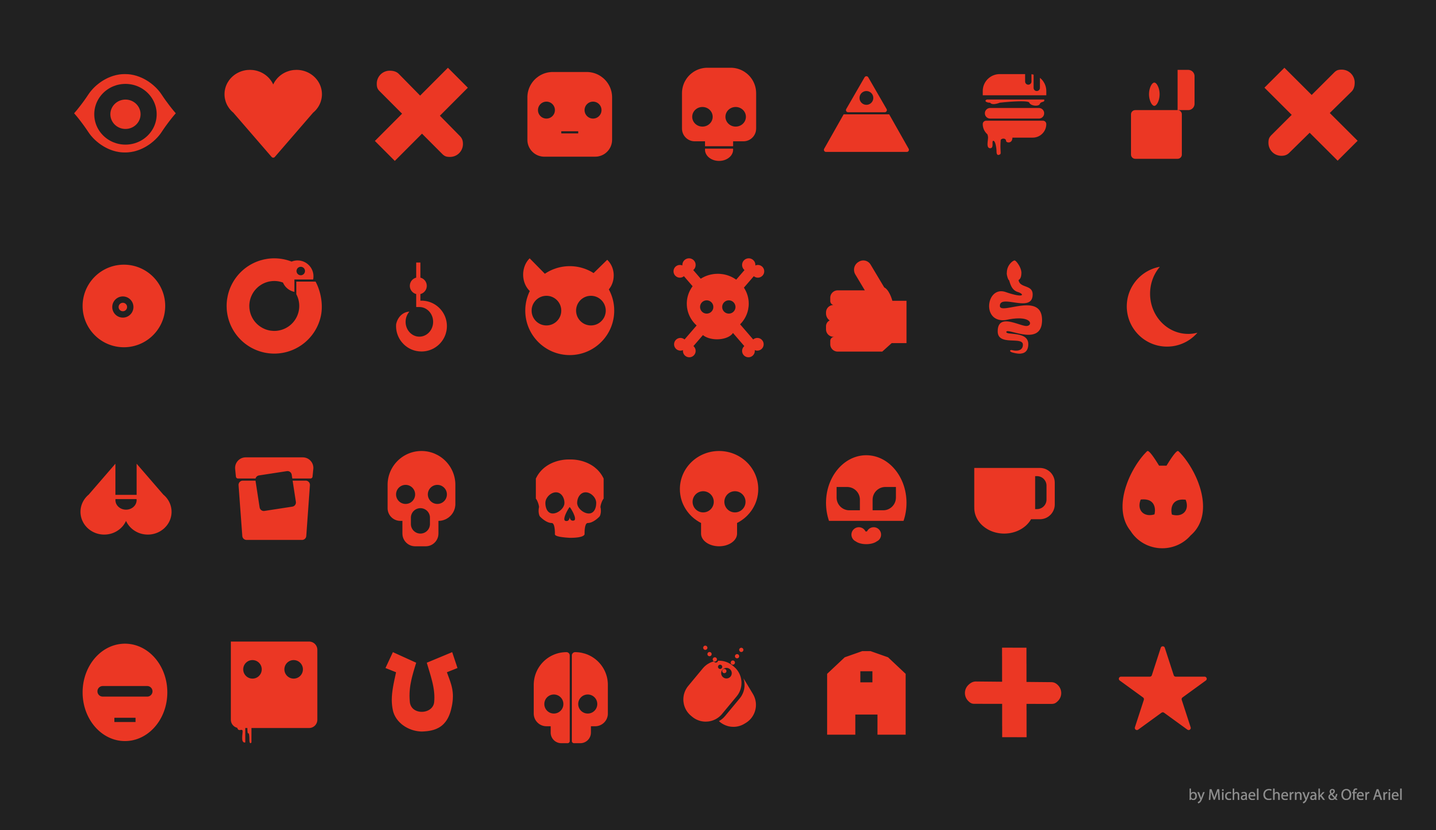
<style>
.page{position:relative;width:1436px;height:830px;background:#212121}
.page>*{position:absolute;margin:0}
.t1{font:15.7px "MyriadPro-Regular";color:#8c8c8c}
</style>
<div class="page">
<p class="t1" style="left:1190px;top:789px;width:212px;height:15px">by Michael Chernyak &amp; Ofer Ariel</p>
</div>
